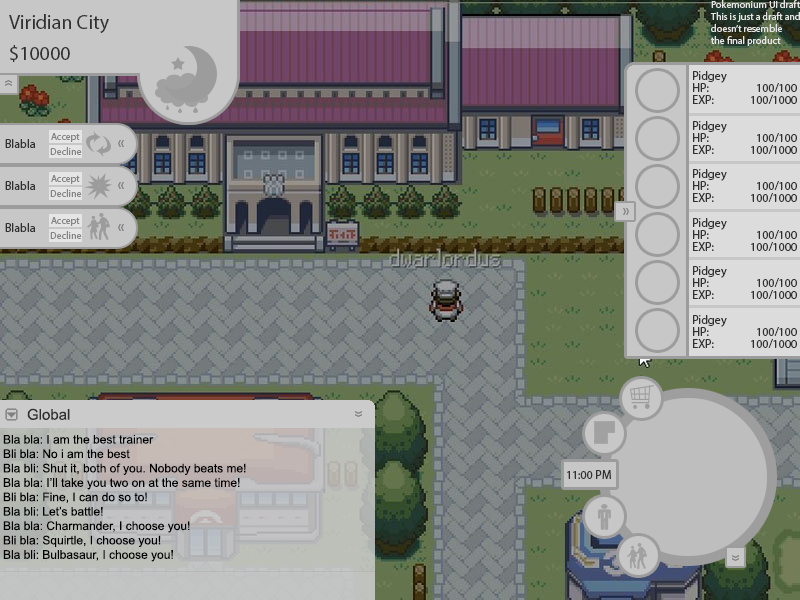
<style>
.page{position:relative;width:800px;height:600px}
.page>*{position:absolute;margin:0}
.t1{font:10px "MyriadPro-Regular";color:#e5e5e5}
.t2{font:20px "MyriadPro-Regular";color:#303030}
.t3{font:12px "MyriadPro-Regular";color:#303030}
.t4{font:10px "MyriadPro-Regular";color:#848484}
.t5{font:15px "ArialMT";color:#303030}
.t6{font:12px "ArialMT";color:#000000}
</style>
<div class="page">
<p class="t1" style="left:710px;top:0px;width:91px;height:46px">Pokemonium UI draft<br>This is just a draft and<br>doesn’t resemble<br>the final product</p>
<p class="t2" style="left:9px;top:14px;width:100px;height:19px">Viridian City</p>
<p class="t2" style="left:10px;top:45px;width:60px;height:17px">$10000</p>
<p class="t3" style="left:693px;top:71px;width:34px;height:12px">Pidgey</p>
<p class="t3" style="left:693px;top:83px;width:16px;height:9px">HP:</p>
<p class="t3" style="left:757px;top:83px;width:40px;height:9px">100/100</p>
<p class="t3" style="left:693px;top:95px;width:21px;height:9px">EXP:</p>
<p class="t3" style="left:751px;top:95px;width:46px;height:9px">100/1000</p>
<p class="t3" style="left:693px;top:121px;width:34px;height:12px">Pidgey</p>
<p class="t4" style="left:51px;top:133px;width:29px;height:9px">Accept</p>
<p class="t3" style="left:693px;top:133px;width:16px;height:9px">HP:</p>
<p class="t3" style="left:757px;top:133px;width:40px;height:9px">100/100</p>
<p class="t3" style="left:5px;top:139px;width:31px;height:9px">Blabla</p>
<p class="t4" style="left:50px;top:147px;width:32px;height:8px">Decline</p>
<p class="t3" style="left:693px;top:145px;width:21px;height:9px">EXP:</p>
<p class="t3" style="left:751px;top:145px;width:46px;height:9px">100/1000</p>
<p class="t3" style="left:693px;top:169px;width:34px;height:12px">Pidgey</p>
<p class="t3" style="left:5px;top:181px;width:31px;height:9px">Blabla</p>
<p class="t4" style="left:51px;top:175px;width:29px;height:9px">Accept</p>
<p class="t3" style="left:693px;top:181px;width:16px;height:9px">HP:</p>
<p class="t3" style="left:757px;top:181px;width:40px;height:9px">100/100</p>
<p class="t4" style="left:50px;top:189px;width:32px;height:8px">Decline</p>
<p class="t3" style="left:693px;top:193px;width:21px;height:9px">EXP:</p>
<p class="t3" style="left:751px;top:193px;width:46px;height:9px">100/1000</p>
<p class="t4" style="left:51px;top:217px;width:29px;height:9px">Accept</p>
<p class="t3" style="left:693px;top:218px;width:34px;height:12px">Pidgey</p>
<p class="t3" style="left:5px;top:223px;width:31px;height:9px">Blabla</p>
<p class="t4" style="left:50px;top:231px;width:32px;height:8px">Decline</p>
<p class="t3" style="left:693px;top:230px;width:16px;height:9px">HP:</p>
<p class="t3" style="left:757px;top:230px;width:40px;height:9px">100/100</p>
<p class="t3" style="left:693px;top:242px;width:21px;height:9px">EXP:</p>
<p class="t3" style="left:751px;top:242px;width:46px;height:9px">100/1000</p>
<p class="t3" style="left:693px;top:266px;width:34px;height:12px">Pidgey</p>
<p class="t3" style="left:693px;top:278px;width:16px;height:9px">HP:</p>
<p class="t3" style="left:757px;top:278px;width:40px;height:9px">100/100</p>
<p class="t3" style="left:693px;top:290px;width:21px;height:9px">EXP:</p>
<p class="t3" style="left:751px;top:290px;width:46px;height:9px">100/1000</p>
<p class="t3" style="left:693px;top:315px;width:34px;height:12px">Pidgey</p>
<p class="t3" style="left:693px;top:327px;width:16px;height:9px">HP:</p>
<p class="t3" style="left:757px;top:327px;width:40px;height:9px">100/100</p>
<p class="t3" style="left:693px;top:339px;width:21px;height:9px">EXP:</p>
<p class="t3" style="left:751px;top:339px;width:46px;height:9px">100/1000</p>
<p class="t5" style="left:27px;top:408px;width:43px;height:12px">Global</p>
<p class="t6" style="left:3px;top:435px;width:243px;height:127px">Bla bla: I am the best trainer<br>Bli bla: No i am the best<br>Bla bli: Shut it, both of you. Nobody beats me!<br>Bla bla: I’ll take you two on at the same time!<br>Bli bla: Fine, I can do so to!<br>Bla bli: Let’s battle!<br>Bla bla: Charmander, I choose you!<br>Bli bla: Squirtle, I choose you!<br>Bla bli: Bulbasaur, I choose you!</p>
<p class="t3" style="left:567px;top:470px;width:44px;height:9px">11:00 PM</p>
</div>
